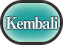
<style>
.page{position:relative;width:63px;height:45px}
.page>*{position:absolute;margin:0}
.t1{font:16px "RyuminPro-ExBold";letter-spacing:-0.08em;color:#fdfbf9;scale:0.95 1}
</style>
<div class="page">
<p class="t1" style="left:6px;top:16px;width:52px;height:13px">Kembali</p>
</div>
